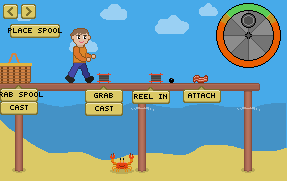
<style>
.page{position:relative;width:287px;height:181px;background:#47aae9}
.page>*{position:absolute;margin:0}
.t1{font:9px "SmallestPixel-7";color:#000000}
</style>
<div class="page">
<p class="t1" style="left:8px;top:28px;width:54px;height:5px">place spool</p>
<p class="t1" style="left:94px;top:93px;width:19px;height:5px">grab</p>
<p class="t1" style="left:134px;top:94px;width:33px;height:5px">reel in</p>
<p class="t1" style="left:188px;top:93px;width:27px;height:5px">attach</p>
<p class="t1" style="left:10px;top:105px;width:18px;height:5px">cast</p>
<p class="t1" style="left:95px;top:106px;width:18px;height:5px">cast</p>
</div>
